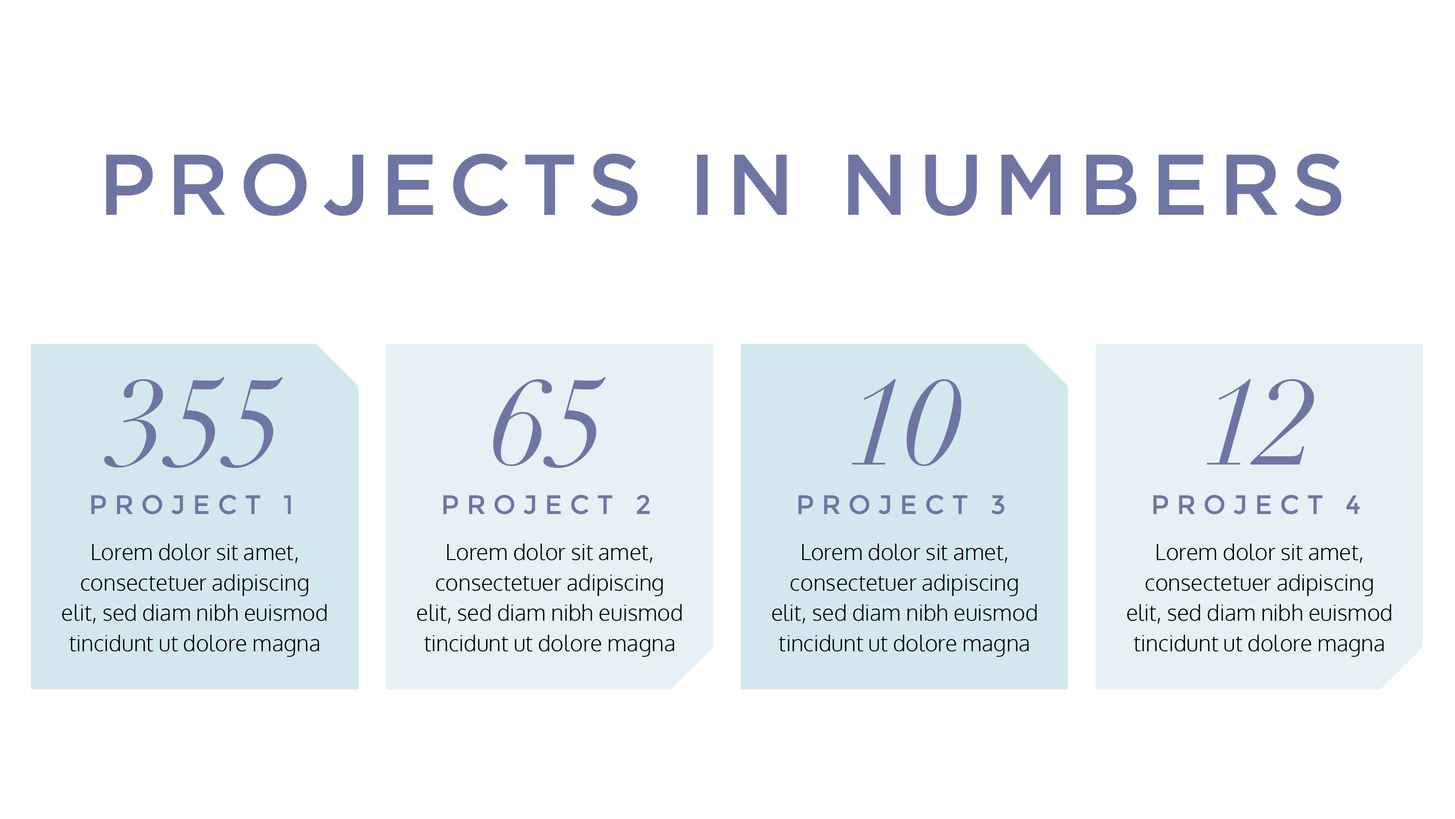
<style>
.page{position:relative;width:1455px;height:819px;background:#ffffff}
.page>*{position:absolute;margin:0}
.t1{font:85.9px "GothamMedium";letter-spacing:0.12em;color:#6f75a3}
.t2{font:121.3px "Didot-Italic";color:#6f75a3}
.t3{font:26.7px "Montserrat-Regular";letter-spacing:0.28em;color:#6f75a3}
.t4{font:22.2px/30.3px "Oxygen-Light";color:#000000}
</style>
<div class="page">
<p class="t1" style="left:106px;top:154px;width:1236px;height:62px">PROJECTS IN NUMBERS</p>
<p class="t2" style="left:104px;top:377px;width:179px;height:91px">355</p>
<p class="t2" style="left:493px;top:377px;width:113px;height:91px">65</p>
<p class="t2" style="left:852px;top:379px;width:109px;height:87px">10</p>
<p class="t2" style="left:1207px;top:379px;width:108px;height:86px">12</p>
<p class="t3" style="left:91px;top:495px;width:200px;height:20px">PROJECT 1</p>
<p class="t3" style="left:443px;top:495px;width:207px;height:20px">PROJECT 2</p>
<p class="t3" style="left:798px;top:495px;width:207px;height:20px">PROJECT 3</p>
<p class="t3" style="left:1154px;top:495px;width:206px;height:20px">PROJECT 4</p>
<p class="t4" style="left:62px;top:543px;width:265px;height:114px;text-align:center">Lorem dolor sit amet, consectetuer adipiscing elit, sed diam nibh euismod tincidunt ut dolore magna aliquam erat volutpat.</p>
<p class="t4" style="left:417px;top:543px;width:265px;height:114px;text-align:center">Lorem dolor sit amet, consectetuer adipiscing elit, sed diam nibh euismod tincidunt ut dolore magna aliquam erat volutpat.</p>
<p class="t4" style="left:772px;top:543px;width:265px;height:114px;text-align:center">Lorem dolor sit amet, consectetuer adipiscing elit, sed diam nibh euismod tincidunt ut dolore magna aliquam erat volutpat.</p>
<p class="t4" style="left:1127px;top:543px;width:265px;height:114px;text-align:center">Lorem dolor sit amet, consectetuer adipiscing elit, sed diam nibh euismod tincidunt ut dolore magna aliquam erat volutpat.</p>
</div>
